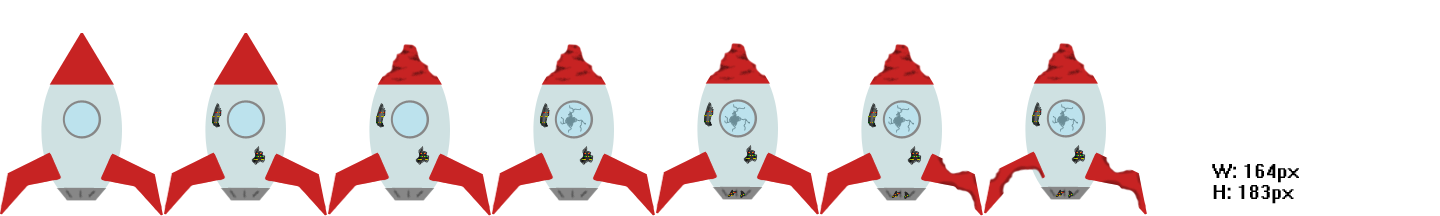
<style>
.page{position:relative;width:1440px;height:216px;background:#ffffff}
.page>*{position:absolute;margin:0}
.t1{font:17.9px "System";color:#000000}
</style>
<div class="page">
<p class="t1" style="left:1212px;top:164px;width:87px;height:40px">W: 164px<br>H: 183px</p>
</div>
